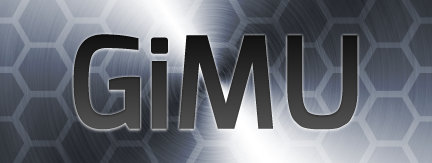
<style>
.page{position:relative;width:432px;height:163px}
.page>*{position:absolute;margin:0}
.t1{font:127.1px "Exo-DemiBold"}
</style>
<div class="page">
<p class="t1" style="left:73px;top:34px;width:285px;height:96px">GiMU</p>
</div>
